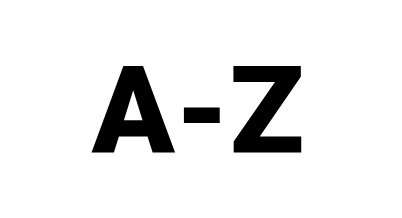
<style>
.page{position:relative;width:402px;height:218px;background:#ffffff}
.page>*{position:absolute;margin:0}
.t1{font:122px "Roboto-Black";color:#000000}
</style>
<div class="page">
<p class="t1" style="left:91px;top:65px;width:211px;height:88px">A-Z</p>
</div>
